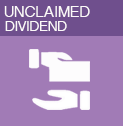
<style>
.page{position:relative;width:123px;height:126px;background:#a17bb6}
.page>*{position:absolute;margin:0}
.t1{font:15px "TeluguSangamMN";color:#fcf9f9}
.t2{font:15px "TamilSangamMN";color:#fcf9f9}
</style>
<div class="page">
<p class="t1" style="left:4px;top:6px;width:86px;height:11px">UNCLAIMED</p>
<p class="t2" style="left:5px;top:21px;width:62px;height:10px">DIVIDEND</p>
</div>
